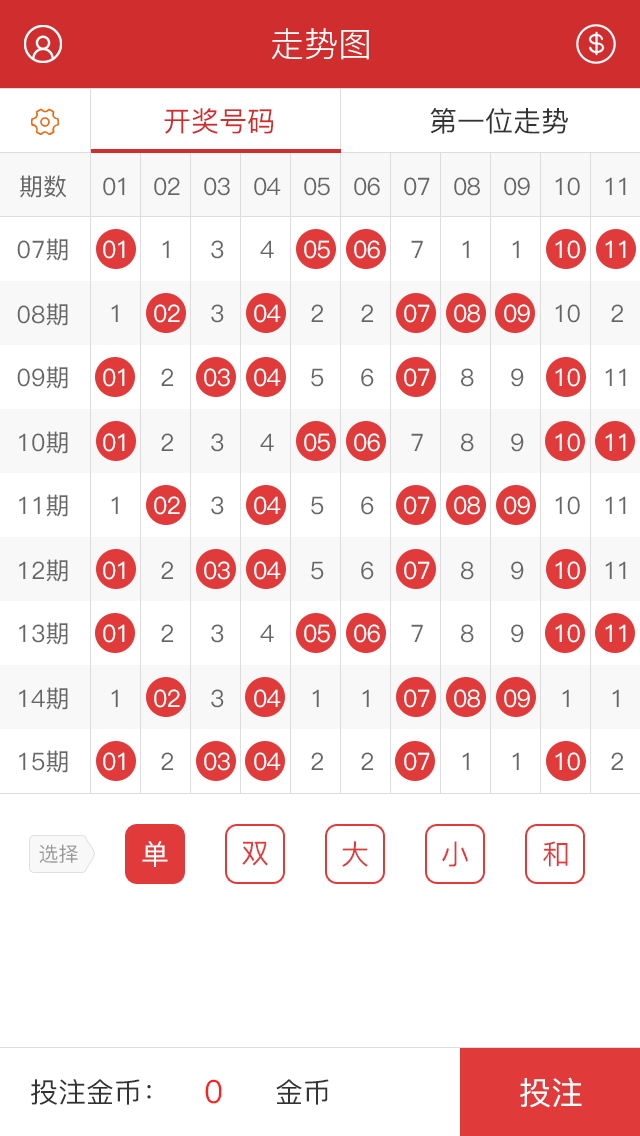
<style>
.page{position:relative;width:640px;height:1136px;background:#ffffff}
.page>*{position:absolute;margin:0}
.t1{font:34px "PingFang-SC-Regular";color:#ffffff}
.t2{font:28px "PingFang-SC-Medium";color:#d02e2e}
.t3{font:28px "PingFang-SC-Medium";color:#333333}
.t4{font:24px "PingFang-SC-Medium";color:#666666}
.t5{font:24px "PingFang-SC-Medium";letter-spacing:-0.05em;color:#666666}
.t6{font:24px "PingFang-SC-Medium";letter-spacing:-0.05em;color:#ffffff}
.t7{font:20px "PingFang-SC-Medium";color:#999999}
.t8{font:28px "PingFang-SC-Medium";color:#fffefe}
.t9{font:28px "PingFang-SC-Medium";color:#e03a3a}
.t10{font:32px "PingFang-SC-Medium";color:#ff1f1f}
.t11{font:32px "PingFang-SC-Medium";color:#ffffff}
</style>
<div class="page">
<p class="t1" style="left:272px;top:28px;width:97px;height:32px">走势图</p>
<p class="t2" style="left:164px;top:108px;width:109px;height:26px">开奖号码</p>
<p class="t3" style="left:430px;top:108px;width:138px;height:26px">第一位走势</p>
<p class="t4" style="left:20px;top:175px;width:47px;height:23px">期数</p>
<p class="t5" style="left:103px;top:177px;width:22px;height:19px">01</p>
<p class="t5" style="left:154px;top:177px;width:26px;height:19px">02</p>
<p class="t5" style="left:204px;top:177px;width:26px;height:19px">03</p>
<p class="t5" style="left:254px;top:177px;width:27px;height:19px">04</p>
<p class="t5" style="left:304px;top:177px;width:26px;height:19px">05</p>
<p class="t5" style="left:354px;top:177px;width:26px;height:19px">06</p>
<p class="t5" style="left:404px;top:177px;width:26px;height:19px">07</p>
<p class="t5" style="left:454px;top:177px;width:26px;height:19px">08</p>
<p class="t5" style="left:504px;top:177px;width:26px;height:19px">09</p>
<p class="t5" style="left:555px;top:177px;width:25px;height:19px">10</p>
<p class="t5" style="left:605px;top:177px;width:21px;height:18px">11</p>
<p class="t4" style="left:17px;top:238px;width:51px;height:23px">07期</p>
<p class="t6" style="left:103px;top:240px;width:22px;height:19px">01</p>
<p class="t5" style="left:162px;top:240px;width:7px;height:18px">1</p>
<p class="t5" style="left:211px;top:240px;width:13px;height:19px">3</p>
<p class="t5" style="left:260px;top:240px;width:14px;height:18px">4</p>
<p class="t6" style="left:304px;top:240px;width:26px;height:19px">05</p>
<p class="t6" style="left:354px;top:240px;width:26px;height:19px">06</p>
<p class="t5" style="left:411px;top:240px;width:12px;height:18px">7</p>
<p class="t5" style="left:462px;top:240px;width:7px;height:18px">1</p>
<p class="t5" style="left:512px;top:240px;width:7px;height:18px">1</p>
<p class="t6" style="left:555px;top:240px;width:25px;height:19px">10</p>
<p class="t6" style="left:605px;top:240px;width:21px;height:18px">11</p>
<p class="t4" style="left:17px;top:303px;width:51px;height:23px">08期</p>
<p class="t5" style="left:111px;top:304px;width:7px;height:18px">1</p>
<p class="t6" style="left:154px;top:304px;width:26px;height:19px">02</p>
<p class="t5" style="left:211px;top:304px;width:13px;height:19px">3</p>
<p class="t6" style="left:254px;top:304px;width:27px;height:19px">04</p>
<p class="t5" style="left:311px;top:304px;width:12px;height:18px">2</p>
<p class="t5" style="left:361px;top:304px;width:12px;height:18px">2</p>
<p class="t6" style="left:404px;top:304px;width:26px;height:19px">07</p>
<p class="t6" style="left:454px;top:304px;width:26px;height:19px">08</p>
<p class="t6" style="left:504px;top:304px;width:26px;height:19px">09</p>
<p class="t5" style="left:555px;top:304px;width:25px;height:19px">10</p>
<p class="t5" style="left:611px;top:304px;width:12px;height:18px">2</p>
<p class="t4" style="left:17px;top:366px;width:51px;height:23px">09期</p>
<p class="t6" style="left:103px;top:368px;width:22px;height:19px">01</p>
<p class="t5" style="left:161px;top:368px;width:12px;height:18px">2</p>
<p class="t6" style="left:204px;top:368px;width:26px;height:19px">03</p>
<p class="t6" style="left:254px;top:368px;width:27px;height:19px">04</p>
<p class="t5" style="left:311px;top:368px;width:13px;height:19px">5</p>
<p class="t5" style="left:361px;top:368px;width:13px;height:19px">6</p>
<p class="t6" style="left:404px;top:368px;width:26px;height:19px">07</p>
<p class="t5" style="left:461px;top:368px;width:13px;height:19px">8</p>
<p class="t5" style="left:511px;top:368px;width:13px;height:19px">9</p>
<p class="t6" style="left:555px;top:368px;width:25px;height:19px">10</p>
<p class="t5" style="left:605px;top:368px;width:21px;height:18px">11</p>
<p class="t4" style="left:19px;top:431px;width:49px;height:23px">10期</p>
<p class="t6" style="left:103px;top:433px;width:22px;height:19px">01</p>
<p class="t5" style="left:161px;top:433px;width:12px;height:18px">2</p>
<p class="t5" style="left:211px;top:433px;width:13px;height:19px">3</p>
<p class="t5" style="left:260px;top:433px;width:14px;height:18px">4</p>
<p class="t6" style="left:304px;top:433px;width:26px;height:19px">05</p>
<p class="t6" style="left:354px;top:433px;width:26px;height:19px">06</p>
<p class="t5" style="left:411px;top:433px;width:12px;height:18px">7</p>
<p class="t5" style="left:461px;top:433px;width:13px;height:19px">8</p>
<p class="t5" style="left:511px;top:433px;width:13px;height:19px">9</p>
<p class="t6" style="left:555px;top:433px;width:25px;height:19px">10</p>
<p class="t6" style="left:605px;top:433px;width:21px;height:18px">11</p>
<p class="t4" style="left:19px;top:494px;width:49px;height:23px">11期</p>
<p class="t5" style="left:111px;top:496px;width:7px;height:18px">1</p>
<p class="t6" style="left:154px;top:496px;width:26px;height:19px">02</p>
<p class="t5" style="left:211px;top:496px;width:13px;height:19px">3</p>
<p class="t6" style="left:254px;top:496px;width:27px;height:19px">04</p>
<p class="t5" style="left:311px;top:496px;width:13px;height:19px">5</p>
<p class="t5" style="left:361px;top:496px;width:13px;height:19px">6</p>
<p class="t6" style="left:404px;top:496px;width:26px;height:19px">07</p>
<p class="t6" style="left:454px;top:496px;width:26px;height:19px">08</p>
<p class="t6" style="left:504px;top:496px;width:26px;height:19px">09</p>
<p class="t5" style="left:555px;top:496px;width:25px;height:19px">10</p>
<p class="t5" style="left:605px;top:496px;width:21px;height:18px">11</p>
<p class="t4" style="left:19px;top:559px;width:49px;height:23px">12期</p>
<p class="t6" style="left:103px;top:561px;width:22px;height:19px">01</p>
<p class="t5" style="left:161px;top:561px;width:12px;height:18px">2</p>
<p class="t6" style="left:204px;top:561px;width:26px;height:19px">03</p>
<p class="t6" style="left:254px;top:561px;width:27px;height:19px">04</p>
<p class="t5" style="left:311px;top:561px;width:13px;height:19px">5</p>
<p class="t5" style="left:361px;top:561px;width:13px;height:19px">6</p>
<p class="t6" style="left:404px;top:561px;width:26px;height:19px">07</p>
<p class="t5" style="left:461px;top:561px;width:13px;height:19px">8</p>
<p class="t5" style="left:511px;top:561px;width:13px;height:19px">9</p>
<p class="t6" style="left:555px;top:561px;width:25px;height:19px">10</p>
<p class="t5" style="left:605px;top:561px;width:21px;height:18px">11</p>
<p class="t4" style="left:19px;top:622px;width:49px;height:23px">13期</p>
<p class="t6" style="left:103px;top:624px;width:22px;height:19px">01</p>
<p class="t5" style="left:161px;top:624px;width:12px;height:18px">2</p>
<p class="t5" style="left:211px;top:624px;width:13px;height:19px">3</p>
<p class="t5" style="left:260px;top:624px;width:14px;height:18px">4</p>
<p class="t6" style="left:304px;top:624px;width:26px;height:19px">05</p>
<p class="t6" style="left:354px;top:624px;width:26px;height:19px">06</p>
<p class="t5" style="left:411px;top:624px;width:12px;height:18px">7</p>
<p class="t5" style="left:461px;top:624px;width:13px;height:19px">8</p>
<p class="t5" style="left:511px;top:624px;width:13px;height:19px">9</p>
<p class="t6" style="left:555px;top:624px;width:25px;height:19px">10</p>
<p class="t6" style="left:605px;top:624px;width:21px;height:18px">11</p>
<p class="t4" style="left:19px;top:687px;width:49px;height:23px">14期</p>
<p class="t5" style="left:111px;top:689px;width:7px;height:18px">1</p>
<p class="t6" style="left:154px;top:689px;width:26px;height:19px">02</p>
<p class="t5" style="left:211px;top:689px;width:13px;height:19px">3</p>
<p class="t6" style="left:254px;top:689px;width:27px;height:19px">04</p>
<p class="t5" style="left:312px;top:689px;width:7px;height:18px">1</p>
<p class="t5" style="left:362px;top:689px;width:7px;height:18px">1</p>
<p class="t6" style="left:404px;top:689px;width:26px;height:19px">07</p>
<p class="t6" style="left:454px;top:689px;width:26px;height:19px">08</p>
<p class="t6" style="left:504px;top:689px;width:26px;height:19px">09</p>
<p class="t5" style="left:562px;top:689px;width:7px;height:18px">1</p>
<p class="t5" style="left:612px;top:689px;width:7px;height:18px">1</p>
<p class="t4" style="left:19px;top:750px;width:49px;height:23px">15期</p>
<p class="t6" style="left:103px;top:752px;width:22px;height:19px">01</p>
<p class="t5" style="left:161px;top:752px;width:12px;height:18px">2</p>
<p class="t6" style="left:204px;top:752px;width:26px;height:19px">03</p>
<p class="t6" style="left:254px;top:752px;width:27px;height:19px">04</p>
<p class="t5" style="left:311px;top:752px;width:12px;height:18px">2</p>
<p class="t5" style="left:361px;top:752px;width:12px;height:18px">2</p>
<p class="t6" style="left:404px;top:752px;width:26px;height:19px">07</p>
<p class="t5" style="left:462px;top:752px;width:7px;height:18px">1</p>
<p class="t5" style="left:512px;top:752px;width:7px;height:18px">1</p>
<p class="t6" style="left:555px;top:752px;width:25px;height:19px">10</p>
<p class="t5" style="left:611px;top:752px;width:12px;height:18px">2</p>
<p class="t7" style="left:39px;top:844px;width:39px;height:19px">选择</p>
<p class="t8" style="left:142px;top:841px;width:26px;height:26px">单</p>
<p class="t9" style="left:242px;top:841px;width:26px;height:25px">双</p>
<p class="t9" style="left:342px;top:841px;width:26px;height:26px">大</p>
<p class="t9" style="left:442px;top:841px;width:26px;height:26px">小</p>
<p class="t9" style="left:543px;top:841px;width:25px;height:26px">和</p>
<p class="t3" style="left:31px;top:1079px;width:120px;height:26px">投注金币：</p>
<p class="t10" style="left:205px;top:1079px;width:17px;height:25px">0</p>
<p class="t3" style="left:276px;top:1079px;width:53px;height:26px">金币</p>
<p class="t11" style="left:520px;top:1077px;width:62px;height:31px">投注</p>
</div>
